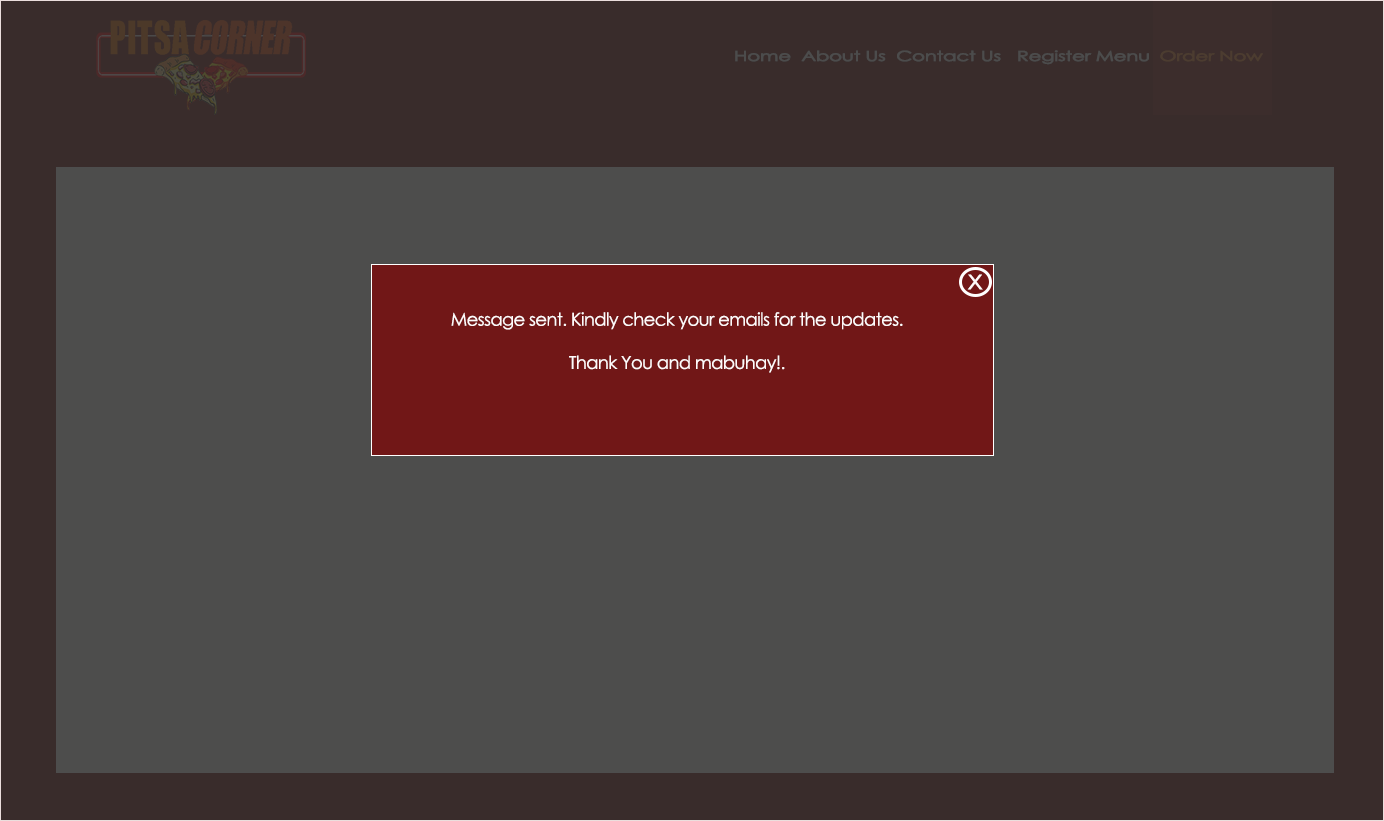
<style>
.page{position:relative;width:1384px;height:821px;background:#4d4d4c}
.page>*{position:absolute;margin:0}
.t1{font:13.9px "CenturyGothic";letter-spacing:-0.035em;color:#4c4c4c;font-weight:bold;scale:1.41 1}
.t2{font:27.8px "CenturyGothic";letter-spacing:-0.035em;color:#fffafa;scale:1.08 1}
.t3{font:18px "CenturyGothic";letter-spacing:-0.035em;color:#fffafa}
</style>
<div class="page">
<p class="t1" style="left:735px;top:50px;width:528px;height:15px">Home  About Us  Contact Us   Register Menu  Order Now</p>
<p class="t2" style="left:967px;top:274px;width:16px;height:16px">x</p>
<p class="t3" style="left:451px;top:312px;width:452px;height:61px;text-align:center">Message sent. Kindly check your emails for the updates.<br><br>Thank You and mabuhay!.</p>
</div>
